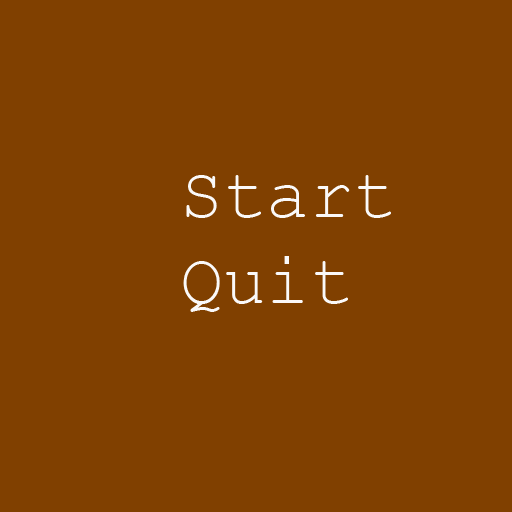
<style>
.page{position:relative;width:512px;height:512px;background:#804000}
.page>*{position:absolute;margin:0}
.t1{font:72px "CourierNewPSMT";color:#faf9f9}
</style>
<div class="page">
<p class="t1" style="left:183px;top:175px;width:208px;height:137px;text-align:center">Start<br>     Quit</p>
</div>
